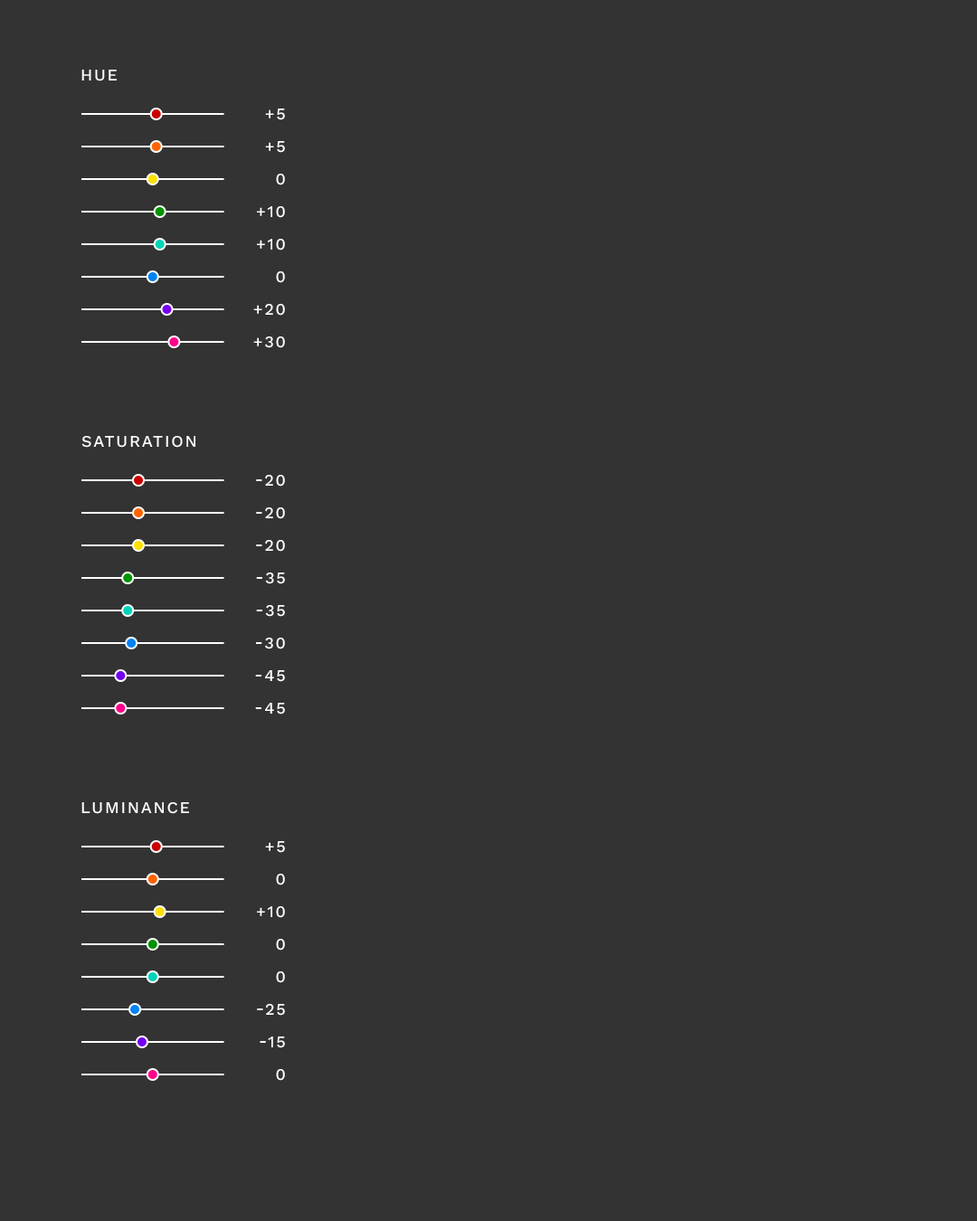
<style>
.page{position:relative;width:977px;height:1221px;background:#333333}
.page>*{position:absolute;margin:0}
.t1{font:16.3px "WorkSansRoman-Medium";letter-spacing:0.1em;color:#ffffff;text-transform:uppercase}
</style>
<div class="page">
<p class="t1" style="left:81px;top:70px;width:36px;height:11px">Hue</p>
<p class="t1" style="left:265px;top:109px;width:20px;height:11px">+5</p>
<p class="t1" style="left:265px;top:141px;width:20px;height:12px">+5</p>
<p class="t1" style="left:276px;top:174px;width:9px;height:11px">0</p>
<p class="t1" style="left:257px;top:206px;width:28px;height:12px">+10</p>
<p class="t1" style="left:257px;top:239px;width:28px;height:12px">+10</p>
<p class="t1" style="left:276px;top:271px;width:9px;height:12px">0</p>
<p class="t1" style="left:253px;top:304px;width:32px;height:12px">+20</p>
<p class="t1" style="left:253px;top:336px;width:32px;height:12px">+30</p>
<p class="t1" style="left:81px;top:436px;width:114px;height:12px">Saturation</p>
<p class="t1" style="left:256px;top:475px;width:29px;height:12px">-20</p>
<p class="t1" style="left:256px;top:507px;width:29px;height:12px">-20</p>
<p class="t1" style="left:256px;top:540px;width:29px;height:12px">-20</p>
<p class="t1" style="left:256px;top:572px;width:29px;height:12px">-35</p>
<p class="t1" style="left:256px;top:605px;width:29px;height:12px">-35</p>
<p class="t1" style="left:256px;top:638px;width:29px;height:11px">-30</p>
<p class="t1" style="left:255px;top:670px;width:30px;height:12px">-45</p>
<p class="t1" style="left:255px;top:703px;width:30px;height:11px">-45</p>
<p class="t1" style="left:81px;top:802px;width:108px;height:12px">Luminance</p>
<p class="t1" style="left:265px;top:841px;width:20px;height:12px">+5</p>
<p class="t1" style="left:276px;top:874px;width:9px;height:11px">0</p>
<p class="t1" style="left:257px;top:906px;width:28px;height:12px">+10</p>
<p class="t1" style="left:276px;top:939px;width:9px;height:11px">0</p>
<p class="t1" style="left:276px;top:971px;width:9px;height:12px">0</p>
<p class="t1" style="left:257px;top:1004px;width:28px;height:12px">-25</p>
<p class="t1" style="left:260px;top:1036px;width:25px;height:12px">-15</p>
<p class="t1" style="left:276px;top:1069px;width:9px;height:12px">0</p>
</div>
